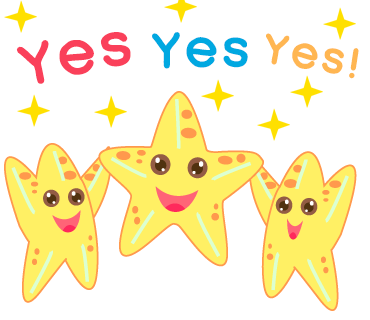
<style>
.page{position:relative;width:370px;height:320px;background:#ffffff}
.page>*{position:absolute;margin:0}
.t1{font:110px "2005_iannnnnMTV";letter-spacing:0.025em;color:#fa405a;scale:1.06 1}
.t2{font:95px "2005_iannnnnMTV";letter-spacing:0.025em;color:#00a8e1;scale:1.06 1}
.t3{font:80px "2005_iannnnnMTV";letter-spacing:0.025em;color:#ffb652;scale:1.06 1}
</style>
<div class="page">
<p class="t1" style="left:16px;top:32px;width:115px;height:52px;rotate:-12deg">Yes</p>
<p class="t2" style="left:152px;top:32px;width:96px;height:37px">Yes</p>
<p class="t3" style="left:266px;top:33px;width:93px;height:46px;rotate:10deg">Yes!</p>
</div>
